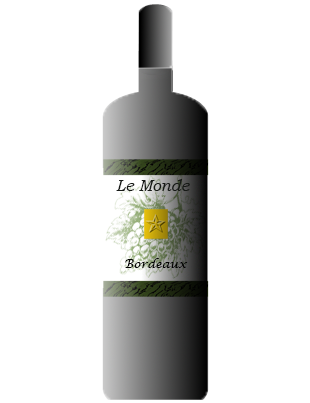
<style>
.page{position:relative;width:310px;height:403px;background:#ffffff}
.page>*{position:absolute;margin:0}
.t1{font:15.9px "BookmanOldStyle-Italic";color:#171a17}
.t2{font:12px "LucidaCalligraphy-Italic";color:#020202}
</style>
<div class="page">
<p class="t1" style="left:116px;top:179px;width:74px;height:12px">Le Monde</p>
<p class="t2" style="left:125px;top:258px;width:63px;height:10px">Bordeaux</p>
</div>
